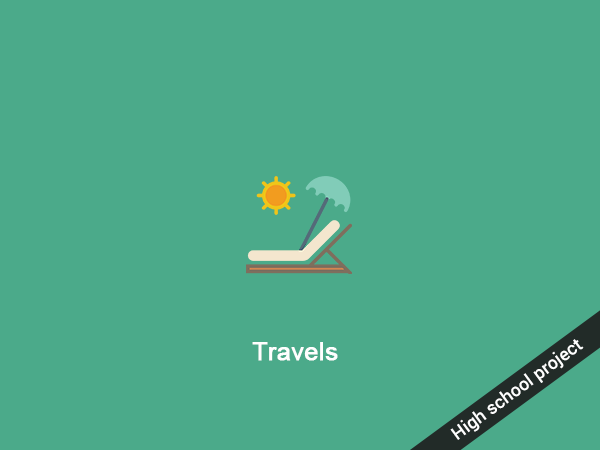
<style>
.page{position:relative;width:600px;height:450px;background:#4baa8a}
.page>*{position:absolute;margin:0}
.t1{font:25px "ArialMT";color:#ffffff;font-weight:bold}
.t2{font:18px "Roboto-Medium";color:#ffffff}
</style>
<div class="page">
<p class="t1" style="left:252px;top:342px;width:86px;height:19px">Travels</p>
<p class="t2" style="left:450px;top:339px;width:134px;height:101px;rotate:-36deg">High school project</p>
</div>
